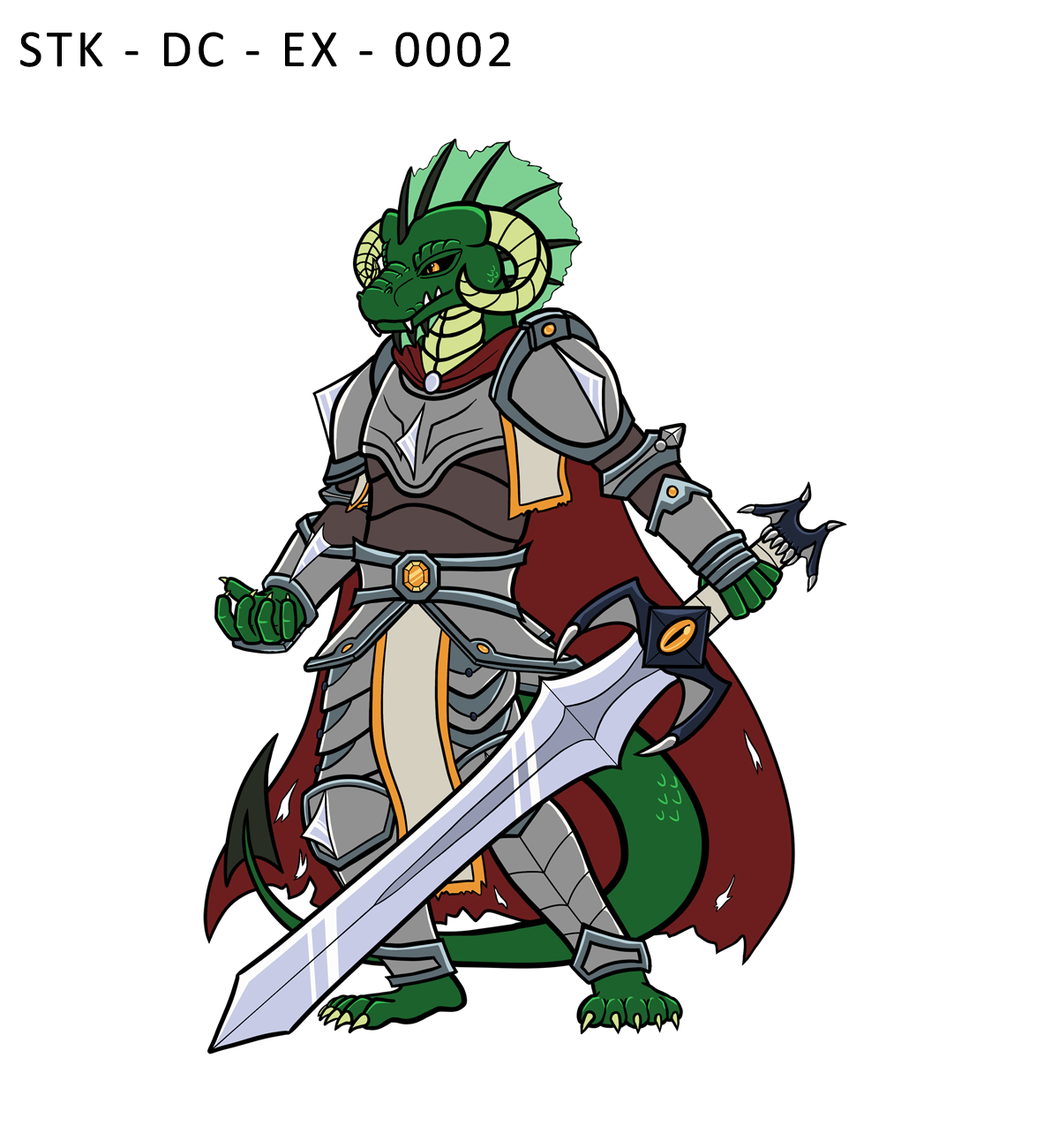
<style>
.page{position:relative;width:1059px;height:1126px;background:#ffffff}
.page>*{position:absolute;margin:0}
.t1{font:53px "Calibri";letter-spacing:0.075em;color:#000000}
</style>
<div class="page">
<p class="t1" style="left:20px;top:32px;width:491px;height:35px">STK - DC - EX - 0002</p>
</div>
